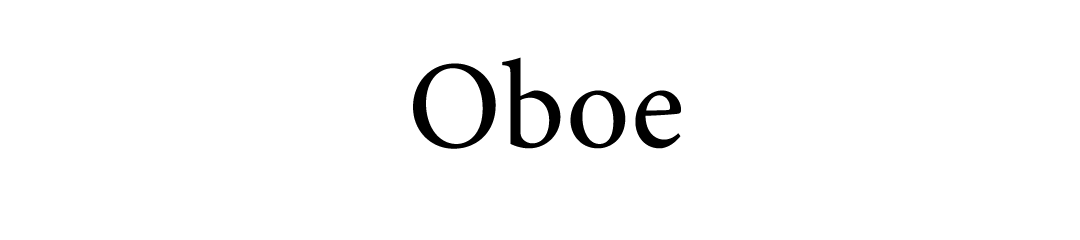
<style>
.page{position:relative;width:1080px;height:240px;background:#ffffff}
.page>*{position:absolute;margin:0}
.t1{font:125px "MinionPro-Regular";color:#000000}
</style>
<div class="page">
<p class="t1" style="left:413px;top:57px;width:268px;height:92px">Oboe</p>
</div>
